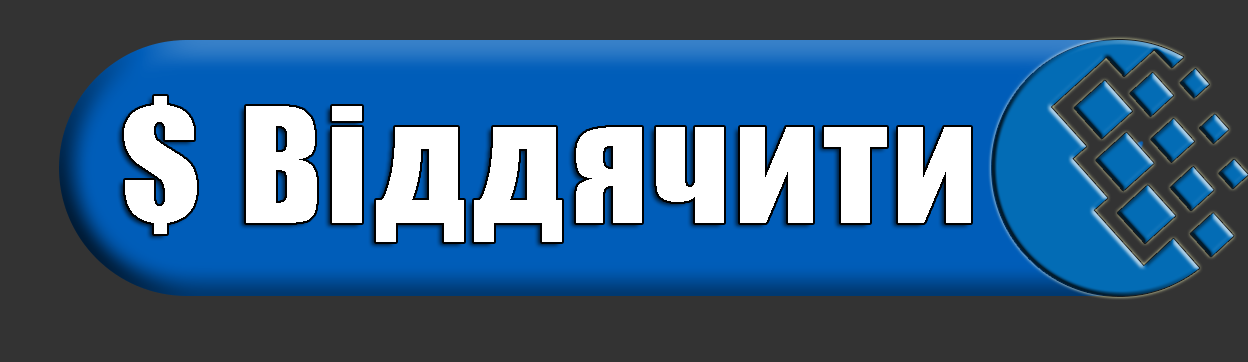
<style>
.page{position:relative;width:1248px;height:362px;background:#333333}
.page>*{position:absolute;margin:0}
.t1{font:148.3px "Impact";letter-spacing:0.04em;color:#ffffff}
</style>
<div class="page">
<p class="t1" style="left:124px;top:96px;width:847px;height:146px">$ Віддячити</p>
</div>
